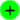
<style>
.page{position:relative;width:20px;height:20px;background:#00ff00}
.page>*{position:absolute;margin:0}
.t1{font:18.1px "UTM-Helve";color:#000000}
</style>
<div class="page">
<p class="t1" style="left:5px;top:6px;width:10px;height:10px">+</p>
</div>
